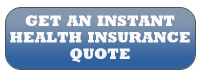
<style>
.page{position:relative;width:200px;height:80px;background:#ffffff}
.page>*{position:absolute;margin:0}
.t1{font:22px/14.5px "Rockwell-ExtraBold";color:#ffffff;font-variant:small-caps}
</style>
<div class="page">
<p class="t1" style="left:10px;top:15px;width:180px;height:48px;text-align:center">get an instant<br>health insurance<br>quote</p>
</div>
